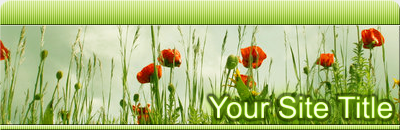
<style>
.page{position:relative;width:400px;height:130px}
.page>*{position:absolute;margin:0}
.t1{font:30px "ArialMT"}
</style>
<div class="page">
<p class="t1" style="left:208px;top:96px;width:185px;height:23px">Your Site Title</p>
</div>
